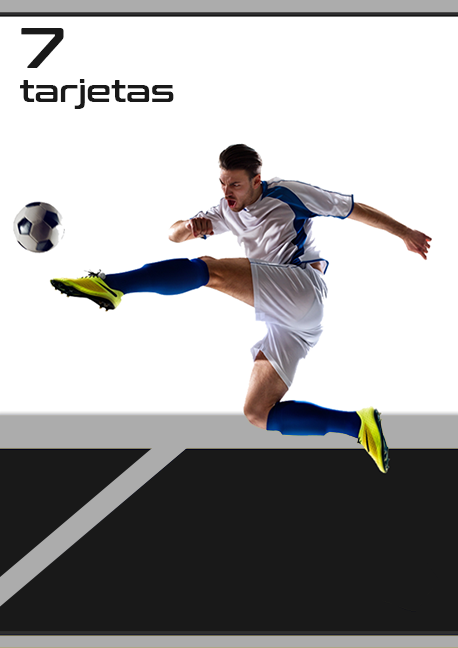
<style>
.page{position:relative;width:458px;height:648px;background:#ffffff}
.page>*{position:absolute;margin:0}
.t1{font:56.2px "ConthraxSb-Regular";color:#191919}
.t2{font:31.2px "ConthraxSb-Regular";color:#191919}
</style>
<div class="page">
<p class="t1" style="left:21px;top:28px;width:43px;height:40px">7</p>
<p class="t2" style="left:20px;top:79px;width:154px;height:30px">tarjetas</p>
</div>
